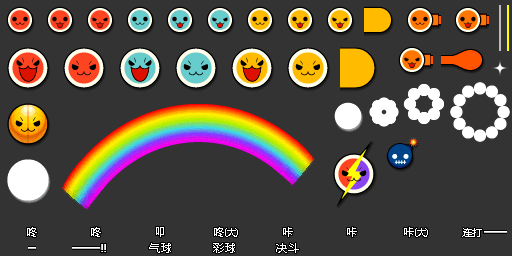
<style>
.page{position:relative;width:512px;height:256px;background:#333333}
.page>*{position:absolute;margin:0}
.t1{font:11px "MicrosoftYaHei";color:#ffffff}
.t2{font:11px "MicrosoftYaHei";color:#ffffff;scale:0.86 1}
.t3{font:10px "MicrosoftYaHei";letter-spacing:-0.06em;color:#ffffff}
.t4{font:11px "MicrosoftYaHei";letter-spacing:-0.06em;color:#ffffff}
.t5{font:10px "MicrosoftYaHei";color:#ffffff}
.t6{font:11px "MicrosoftYaHei";letter-spacing:0.08em;color:#ffffff}
</style>
<div class="page">
<p class="t1" style="left:27px;top:227px;width:10px;height:10px">咚</p>
<p class="t1" style="left:91px;top:227px;width:10px;height:10px">咚</p>
<p class="t2" style="left:156px;top:227px;width:8px;height:10px">叩</p>
<p class="t3" style="left:214px;top:227px;width:24px;height:10px"><span class="t4">咚</span>(大)</p>
<p class="t1" style="left:283px;top:227px;width:10px;height:10px">咔</p>
<p class="t1" style="left:347px;top:227px;width:10px;height:10px">咔</p>
<p class="t3" style="left:404px;top:227px;width:24px;height:10px"><span class="t4">咔</span>(大)</p>
<p class="t5" style="left:462px;top:228px;width:20px;height:9px">连打</p>
<p class="t6" style="left:149px;top:243px;width:22px;height:10px">气球</p>
<p class="t6" style="left:213px;top:243px;width:22px;height:10px">彩球</p>
<p class="t6" style="left:276px;top:243px;width:23px;height:10px">决斗</p>
</div>
